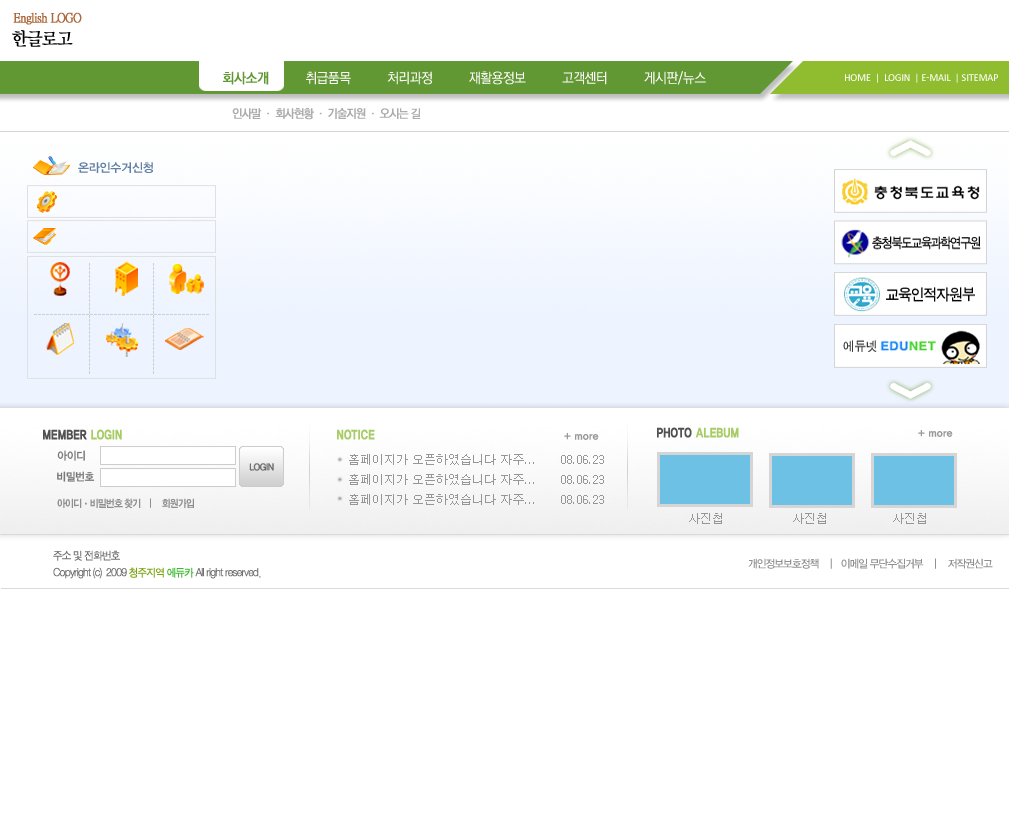
<style>
.page{position:relative;width:1009px;height:837px;background:#ffffff}
.page>*{position:absolute;margin:0}
.t1{font:13px "YMjO530";letter-spacing:-0.05em;color:#ad693c;font-weight:bold;scale:0.95 1}
.t2{font:18px "YMjO530";letter-spacing:-0.05em;color:#010101;font-weight:bold;scale:0.95 1}
.t3{font:14px "YGO530";letter-spacing:-0.05em;color:#ffffff;scale:0.95 1}
.t4{font:14px "YGO530";letter-spacing:-0.05em;color:#629834;font-weight:bold;scale:0.95 1}
.t5{font:10.5px "Calibri";letter-spacing:-0.02em;color:#ffffff;text-transform:uppercase}
.t6{font:12px "YGO530";letter-spacing:-0.1em;color:#acacac;font-weight:bold;scale:0.95 1}
.t7{font:12px "YDIYGO340";letter-spacing:-0.02em;color:#6280a3;text-transform:uppercase}
.t8{font:12px "YGO16";letter-spacing:-0.1em;color:#515151;text-transform:uppercase;font-weight:bold;scale:0.8 1}
.t9{font:12px "YGO16";letter-spacing:-0.1em;color:#a7cc66;text-transform:uppercase;font-weight:bold;scale:0.8 1}
.t10{font:12px "YGO16";letter-spacing:-0.1em;color:#a7cc66;font-weight:bold;scale:0.8 1}
.t11{font:10px "YDIYGO360";color:#999999}
.t12{font:12px "YGO16";letter-spacing:-0.1em;color:#515151;font-weight:bold;scale:0.8 1}
.t13{font:11px "YDIYGO130-KSCpc-EUC-H";letter-spacing:-0.1em;color:#777777;scale:0.95 1}
.t14{font:12px/20px "Dotum";color:#969696}
.t15{font:10px "YDIYGO130-KSCpc-EUC-H";letter-spacing:-0.1em;color:#676767;text-transform:uppercase;scale:0.95 1}
.t16{font:10px "H2gtrE";letter-spacing:-0.1em;color:#8f8f8f;text-transform:uppercase;scale:0.9 1}
.t17{font:10px "H2gtrE";letter-spacing:-0.1em;color:#8f8f8f;text-transform:uppercase;font-weight:bold;scale:0.9 1}
.t18{font:12px "Dotum";color:#969696}
.t19{font:11px "SandJg";letter-spacing:-0.08em;color:#707070;font-weight:bold;scale:0.95 1}
.t20{font:11px "YDIYGO330";letter-spacing:-0.08em;color:#909090;scale:0.95 1}
.t21{font:11px "SandJg";letter-spacing:-0.08em;color:#78a50e;font-weight:bold;scale:0.95 1}
.t22{font:11px "SandJg";letter-spacing:-0.08em;color:#3cb62c;font-weight:bold;scale:0.95 1}
</style>
<div class="page">
<p class="t1" style="left:13px;top:12px;width:69px;height:13px">English LOGO</p>
<p class="t2" style="left:12px;top:30px;width:61px;height:17px">한글로고</p>
<p class="t3" style="left:223px;top:71px;width:483px;height:14px"><span class="t4">회사소개           </span>취급품목           처리과정           재활용정보           고객센터           게시판/뉴스</p>
<p class="t5" style="left:845px;top:73px;width:153px;height:10px">home  |  Login  | e-mail  | sitemap</p>
<p class="t6" style="left:232px;top:108px;width:189px;height:12px">인사말 ㆍ 회사현황 ㆍ 기술지원 ㆍ 오시는 길</p>
<p class="t7" style="left:78px;top:162px;width:75px;height:11px">온라인수거신청</p>
<p class="t8" style="left:43px;top:429px;width:79px;height:11px">Member <span class="t9">Login</span></p>
<p class="t10" style="left:337px;top:429px;width:38px;height:11px">NOTICE</p>
<p class="t11" style="left:564px;top:433px;width:35px;height:7px">+ more</p>
<p class="t10" style="left:657px;top:427px;width:82px;height:11px"><span class="t12">PHOTO </span>ALEBUM</p>
<p class="t11" style="left:918px;top:430px;width:35px;height:7px">+ more</p>
<p class="t13" style="left:57px;top:450px;width:28px;height:11px">아이디</p>
<p class="t14" style="left:349px;top:454px;width:255px;height:51px">홈페이지가 오픈하였습니다 자주...      08.06.23<br>홈페이지가 오픈하였습니다 자주...      08.06.23<br>홈페이지가 오픈하였습니다 자주...      08.06.23</p>
<p class="t13" style="left:57px;top:471px;width:38px;height:11px">비밀번호</p>
<p class="t15" style="left:249px;top:463px;width:25px;height:8px">Login</p>
<p class="t16" style="left:57px;top:498px;width:137px;height:11px">아이디<span class="t17">·</span>비밀번호 찾기    |     회원가입</p>
<p class="t18" style="left:689px;top:513px;width:237px;height:11px">사진첩                 사진첩                사진첩</p>
<p class="t19" style="left:53px;top:550px;width:67px;height:11px">주소 및 전화번호</p>
<p class="t20" style="left:748px;top:558px;width:245px;height:11px">개인정보보호정책    |   이메일 무단수집거부    |    저작권신고</p>
<p class="t19" style="left:53px;top:567px;width:208px;height:12px">Copyright (c)  2009 <span class="t21">청주지역 </span><span class="t22">에듀카 </span>All right reserved.</p>
</div>
